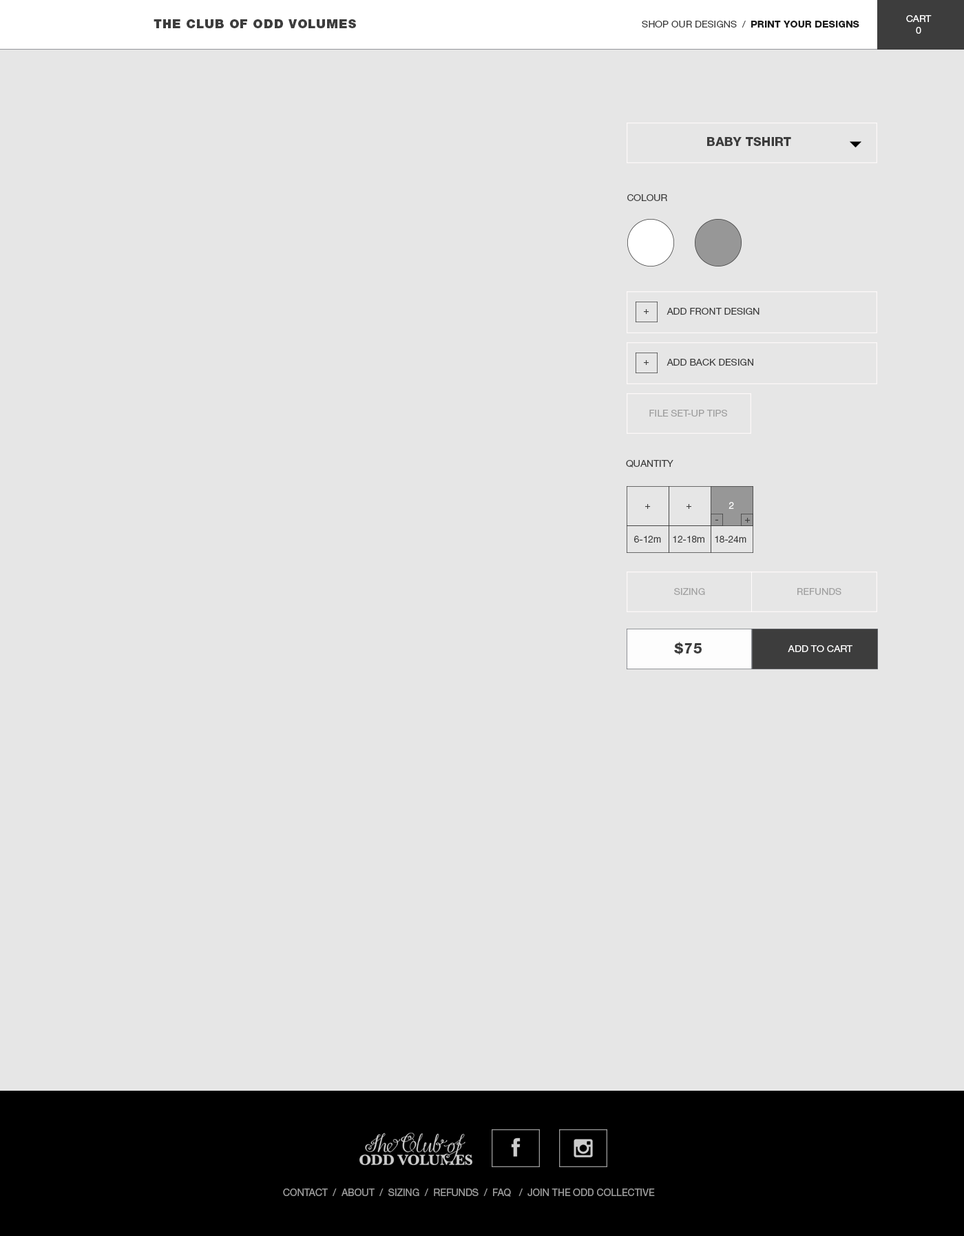
<style>
.page{position:relative;width:964px;height:1236px;background:#e6e6e6}
.page>*{position:absolute;margin:0}
.t1{font:9.6px "HelveticaNeueLTStd-Roman";color:#ffffff}
.t2{font:12.4px "HelveticaNeueLTStd-Blk";letter-spacing:0.05em;color:#3d3d3d}
.t3{font:9.6px "HelveticaNeueLTStd-Roman";color:#3d3d3d}
.t4{font:9.6px "HelveticaNeueLTStd-Hv";color:#1b1b1b}
.t5{font:12.4px "HelveticaNeueLTStd-Hv";color:#3d3d3d}
.t6{font:9.6px "HelveticaNeueLTStd-Roman";color:#3e3e3e}
.t7{font:9.5px "HelveticaNeueLTStd-Roman";color:#3e3e3e}
.t8{font:9.6px "HelveticaNeueLTStd-Roman";color:#a0a0a0}
.t9{font:9.5px "HelveticaNeueLTStd-Roman";color:#ffffff}
.t10{font:9.5px "HelveticaNeueLTStd-Roman";color:#3d3d3d}
.t11{font:13.8px "HelveticaNeueLTStd-Hv";letter-spacing:0.05em;color:#3d3d3d}
.t12{font:9.6px "HelveticaNeueLTStd-Roman";color:#faf9f9}
.t13{font:9.9px "HelveticaNeueLTStd-Roman";color:#9b9b9b}
</style>
<div class="page">
<p class="t1" style="left:907px;top:15px;width:25px;height:19px;text-align:center">CART<br>0</p>
<p class="t2" style="left:154px;top:19px;width:202px;height:9px">THE CLUB OF ODD VOLUMES</p>
<p class="t3" style="left:642px;top:21px;width:218px;height:7px">SHOP OUR DESIGNS  /  <span class="t4">PRINT YOUR DESIGNS</span></p>
<p class="t5" style="left:707px;top:137px;width:84px;height:9px">BABY TSHIRT</p>
<p class="t6" style="left:628px;top:194px;width:39px;height:7px">COLOUR</p>
<p class="t7" style="left:644px;top:309px;width:6px;height:5px">+</p>
<p class="t6" style="left:667px;top:308px;width:93px;height:7px">ADD FRONT DESIGN</p>
<p class="t7" style="left:644px;top:360px;width:6px;height:5px">+</p>
<p class="t6" style="left:667px;top:359px;width:87px;height:7px">ADD BACK DESIGN</p>
<p class="t8" style="left:650px;top:410px;width:77px;height:7px">FILE SET-UP TIPS</p>
<p class="t6" style="left:626px;top:460px;width:48px;height:8px">QUANTITY</p>
<p class="t7" style="left:645px;top:504px;width:6px;height:5px">+</p>
<p class="t7" style="left:686px;top:504px;width:6px;height:5px">+</p>
<p class="t9" style="left:729px;top:502px;width:5px;height:7px">2</p>
<p class="t7" style="left:715px;top:519px;width:3px;height:2px">-</p>
<p class="t7" style="left:745px;top:518px;width:6px;height:5px">+</p>
<p class="t7" style="left:634px;top:536px;width:27px;height:7px">6-12m</p>
<p class="t7" style="left:673px;top:536px;width:32px;height:7px">12-18m</p>
<p class="t10" style="left:715px;top:536px;width:32px;height:7px">18-24m</p>
<p class="t8" style="left:674px;top:588px;width:31px;height:7px">SIZING</p>
<p class="t8" style="left:798px;top:588px;width:44px;height:7px">REFUNDS</p>
<p class="t11" style="left:674px;top:642px;width:28px;height:13px">$75</p>
<p class="t12" style="left:788px;top:645px;width:65px;height:7px">ADD TO CART</p>
<p class="t13" style="left:283px;top:1189px;width:372px;height:8px">CONTACT  /  ABOUT  /  SIZING  /  REFUNDS  /  FAQ   /  JOIN THE ODD COLLECTIVE</p>
</div>
